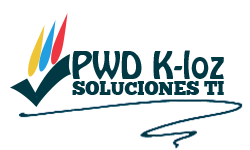
<style>
.page{position:relative;width:250px;height:150px;background:#ffffff}
.page>*{position:absolute;margin:0}
.t1{font:33.4px "HoboStd";color:#003943}
.t2{font:18.8px "ChunkFiveEx";color:#003943}
</style>
<div class="page">
<p class="t1" style="left:72px;top:50px;width:152px;height:30px">PWD K-loz</p>
<p class="t2" style="left:72px;top:81px;width:152px;height:14px">SOLUCIONES TI</p>
</div>
